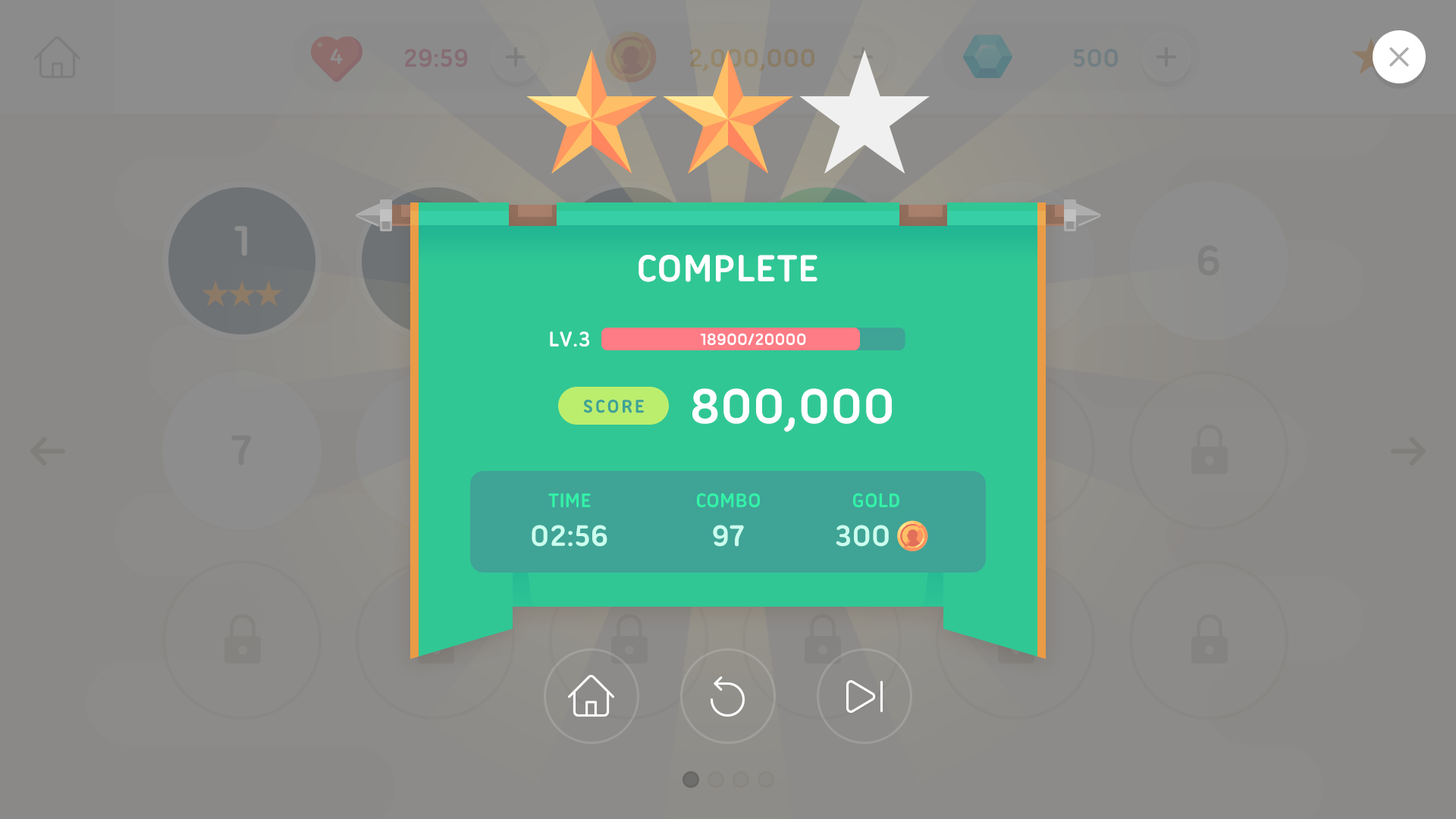
<style>
.page{position:relative;width:1456px;height:819px;background:#8b8987}
.page>*{position:absolute;margin:0}
.t1{font:40.9px "UbuntuTitling-Bold";color:#ffffff;text-transform:uppercase}
.t2{font:22.7px "UbuntuTitling-Bold";color:#ffffff;text-transform:uppercase}
.t3{font:17.4px "UbuntuTitling-Bold";color:#ffffff;text-transform:uppercase}
.t4{font:53.1px "UbuntuTitling-Bold";color:#ffffff;text-transform:uppercase}
.t5{font:19.7px "UbuntuTitling-Bold";letter-spacing:0.1em;color:#3fa396;text-transform:uppercase}
.t6{font:21.2px "UbuntuTitling-Bold";color:#33f2a7;text-transform:uppercase}
.t7{font:31.8px "UbuntuTitling-Bold";color:#cbffee;text-transform:uppercase}
</style>
<div class="page">
<p class="t1" style="left:639px;top:254px;width:178px;height:28px">complete</p>
<p class="t2" style="left:550px;top:331px;width:39px;height:16px">lv.3</p>
<p class="t3" style="left:701px;top:333px;width:105px;height:12px">18900/20000</p>
<p class="t4" style="left:692px;top:388px;width:200px;height:44px">800,000</p>
<p class="t5" style="left:583px;top:400px;width:61px;height:13px">score</p>
<p class="t6" style="left:548px;top:493px;width:43px;height:14px">Time</p>
<p class="t6" style="left:697px;top:493px;width:63px;height:14px">combo</p>
<p class="t6" style="left:853px;top:493px;width:46px;height:14px">gold</p>
<p class="t7" style="left:532px;top:525px;width:75px;height:22px">02:56</p>
<p class="t7" style="left:713px;top:525px;width:31px;height:22px">97</p>
<p class="t7" style="left:836px;top:525px;width:53px;height:22px">300</p>
</div>
